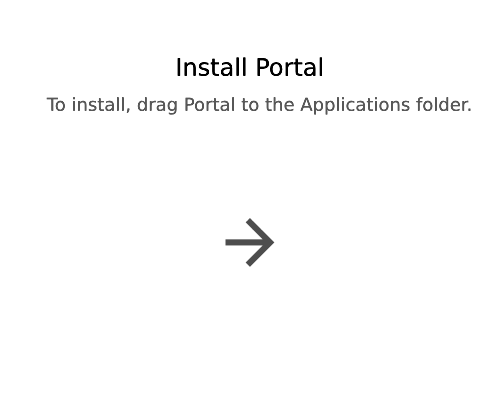
<style>
.page{position:relative;width:500px;height:400px;background:#ffffff}
.page>*{position:absolute;margin:0}
.t1{font:24px "Avenir-Roman";color:#000000}
.t2{font:18px "Avenir-Roman";color:#585858}
</style>
<div class="page">
<p class="t1" style="left:177px;top:57px;width:145px;height:19px">Install Portal</p>
<p class="t2" style="left:46px;top:97px;width:425px;height:18px">To install, drag Portal to the Applications folder.</p>
</div>
